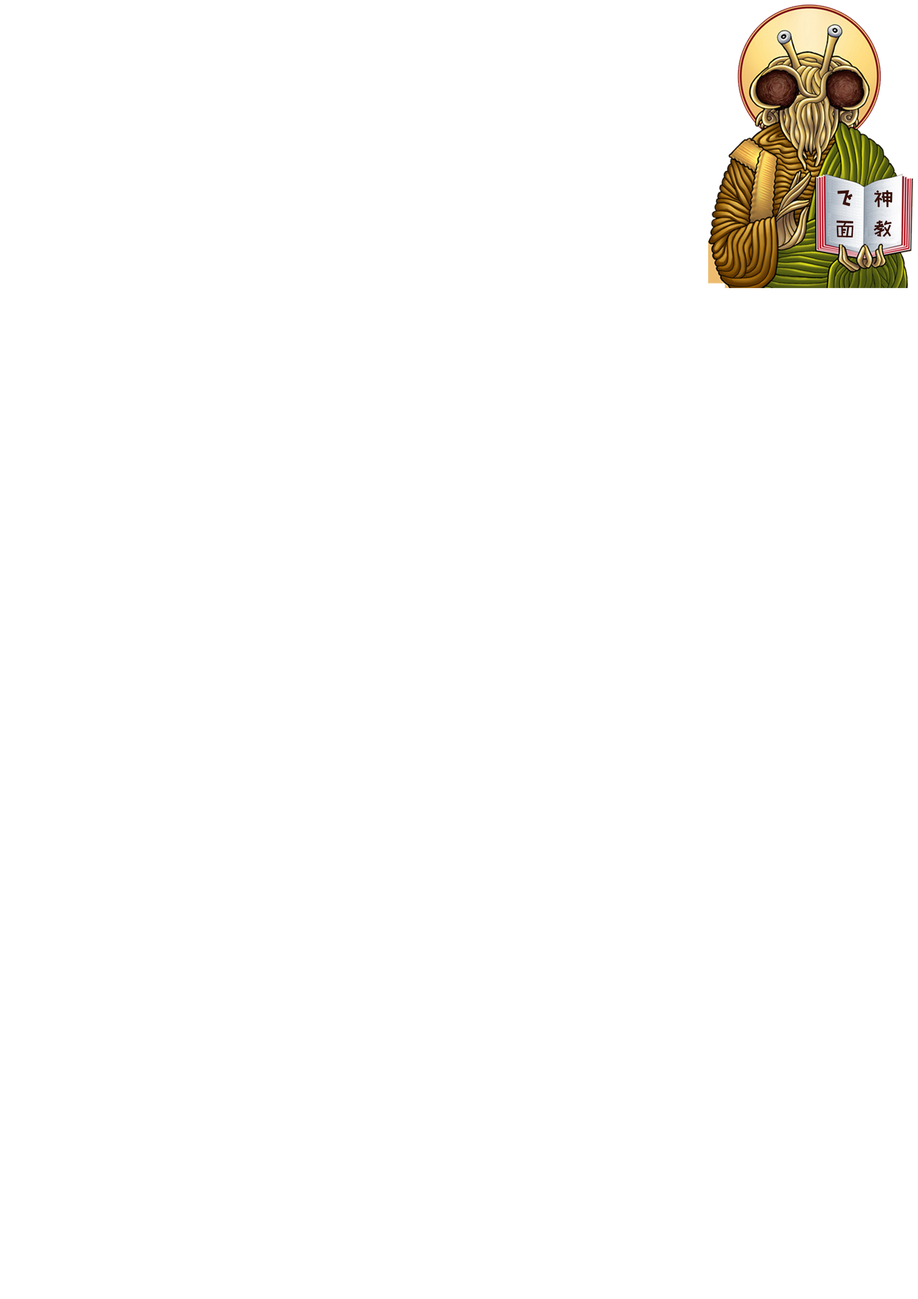
<style>
.page{position:relative;width:918px;height:1299px;background:#ffffff}
.page>*{position:absolute;margin:0}
.t1{font:21.3px "HappyZcool";color:#39130c}
.t2{font:21.3px "HappyZcool";color:#39130c;scale:1.07 1}
</style>
<div class="page">
<p class="t1" style="left:837px;top:190px;width:16px;height:16px">飞</p>
<p class="t2" style="left:874px;top:190px;width:19px;height:17px">神</p>
<p class="t1" style="left:836px;top:220px;width:18px;height:18px">面</p>
<p class="t1" style="left:874px;top:220px;width:18px;height:17px;rotate:2deg">教</p>
</div>
